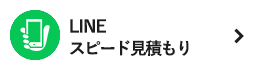
<style>
.page{position:relative;width:260px;height:70px;background:#ffffff}
.page>*{position:absolute;margin:0}
.t1{font:17px/22px "YuGothic-Bold";letter-spacing:-0.1em;color:#1e1e1e}
.t2{font:17px/22px "YuGothic-Bold";letter-spacing:-0.05em;color:#1e1e1e}
</style>
<div class="page">
<p class="t1" style="left:69px;top:19px;width:120px;height:37px"><span class="t2">LINE<br></span>スピード見積もり</p>
</div>
